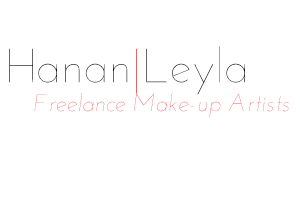
<style>
.page{position:relative;width:300px;height:200px;background:#ffffff}
.page>*{position:absolute;margin:0}
.t1{font:24px "JosefinSans-ThinItalic";color:#000000}
.t2{font:48px "JosefinSans-Thin";color:#000000}
</style>
<div class="page">
<p class="t1" style="left:9px;top:46px;width:280px;height:71px"><span class="t2">Hanan</span><span class="t2">|</span><span class="t2">Leyla<br>       </span>Freelance Make-up Artists</p>
</div>
